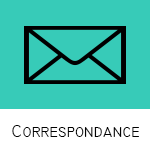
<style>
.page{position:relative;width:150px;height:150px;background:#37cbb8}
.page>*{position:absolute;margin:0}
.t1{font:18px "Technic";color:#000000}
</style>
<div class="page">
<p class="t1" style="left:12px;top:125px;width:127px;height:12px">Correspondance</p>
</div>
